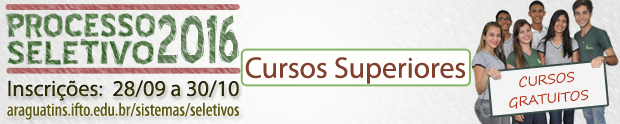
<style>
.page{position:relative;width:620px;height:124px}
.page>*{position:absolute;margin:0}
.t1{font:39.7px "BlueHighwayLinocut"}
.t2{font:67px "BlueHighwayLinocut-Regular";scale:0.65 1}
.t3{font:39.7px "BlueHighwayLinocut";scale:1.12 1}
.t4{font:29.8px "MyriadPro-Regular";color:#82402f}
.t5{font:13.2px/16.5px "SegoePrint";color:#af2e15}
.t6{font:22.3px "MyriadPro-Regular";color:#2c2a0c}
.t7{font:18.6px "MyriadPro-Cond";color:#5d5919}
</style>
<div class="page">
<p class="t1" style="left:6px;top:13px;width:149px;height:26px">PROCESSO</p>
<p class="t2" style="left:157px;top:14px;width:82px;height:50px">2016</p>
<p class="t3" style="left:7px;top:39px;width:147px;height:27px">SELETIVO</p>
<p class="t4" style="left:245px;top:57px;width:220px;height:27px">Cursos Superiores</p>
<p class="t5" style="left:509px;top:71px;width:80px;height:38px;text-align:center;rotate:-6deg">CURSOS<br>GRATUITOS</p>
<p class="t6" style="left:8px;top:80px;width:231px;height:21px">Inscrições:  28/09 a 30/10</p>
<p class="t7" style="left:7px;top:102px;width:232px;height:18px">araguatins.ifto.edu.br/sistemas/seletivos</p>
</div>
